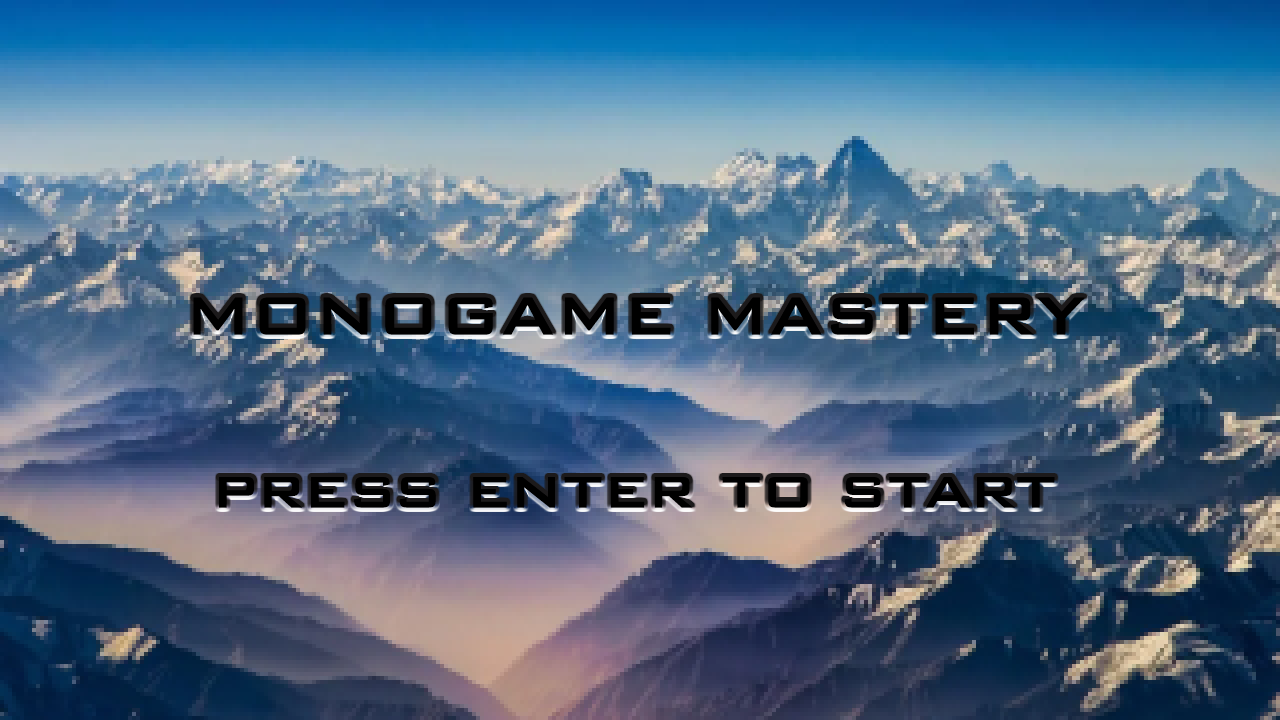
<style>
.page{position:relative;width:1280px;height:720px}
.page>*{position:absolute;margin:0}
.t1{font:72px "BankGothicBT-Medium";color:#000000}
</style>
<div class="page">
<p class="t1" style="left:193px;top:297px;width:892px;height:211px;text-align:center">MONOGAME MASTERY<br><br>press enter to start</p>
</div>
